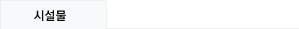
<style>
.page{position:relative;width:299px;height:29px;background:#ffffff}
.page>*{position:absolute;margin:0}
.t1{font:12px "YGO540";color:#090909}
</style>
<div class="page">
<p class="t1" style="left:34px;top:10px;width:32px;height:11px">시설물</p>
</div>
